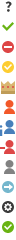
<style>
.page{position:relative;width:16px;height:240px;background:#ffffff}
.page>*{position:absolute;margin:0}
.t1{font:14px "BrandonGrotesque-Black";color:#3a3a3a}
.t2{font:16px "BrandonGrotesque-Black";color:#487fba}
</style>
<div class="page">
<p class="t1" style="left:5px;top:1px;width:7px;height:11px">?</p>
<p class="t2" style="left:0px;top:125px;width:3px;height:11px">i</p>
</div>
